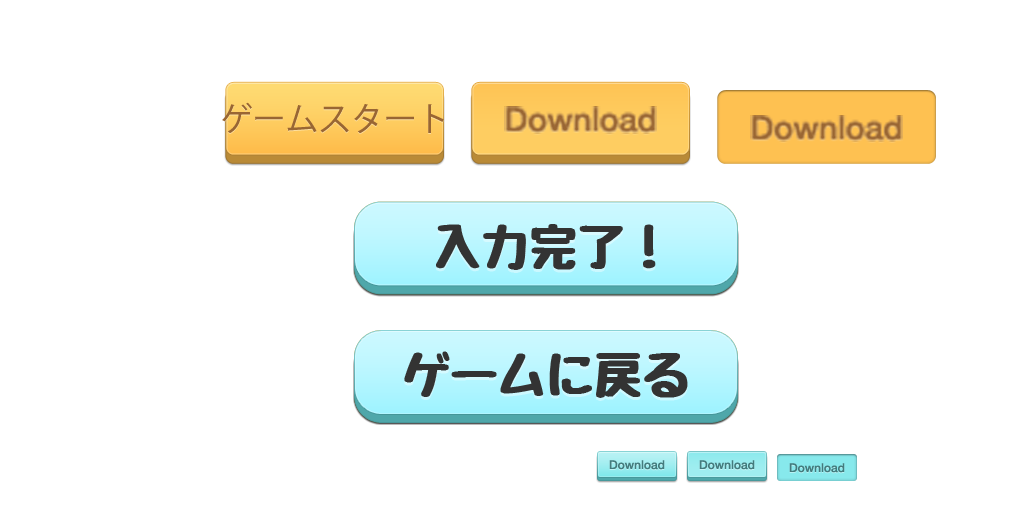
<style>
.page{position:relative;width:1024px;height:512px;background:#ffffff}
.page>*{position:absolute;margin:0}
.t1{font:32.8px "KozGoPr6N-Regular";color:#996633}
.t2{font:32.8px "HelveticaNeue-Medium";color:#996633}
.t3{font:48px "Jiyucho"}
.t4{font:48px "Jiyucho";color:#333333}
.t5{font:12px "HelveticaNeue-Medium";color:#437b7d}
</style>
<div class="page">
<p class="t1" style="left:222px;top:102px;width:222px;height:32px">ゲームスタート</p>
<p class="t2" style="left:504px;top:106px;width:153px;height:28px">Download</p>
<p class="t2" style="left:750px;top:115px;width:153px;height:27px">Download</p>
<p class="t3" style="left:436px;top:229px;width:220px;height:46px">入力完了！</p>
<p class="t4" style="left:436px;top:224px;width:220px;height:46px">入力完了！</p>
<p class="t4" style="left:436px;top:224px;width:220px;height:46px">入力完了！</p>
<p class="t4" style="left:404px;top:351px;width:284px;height:47px">ゲームに戻る</p>
<p class="t4" style="left:404px;top:351px;width:284px;height:47px">ゲームに戻る</p>
<p class="t3" style="left:404px;top:356px;width:284px;height:47px">ゲームに戻る</p>
<p class="t5" style="left:609px;top:460px;width:56px;height:10px">Download</p>
<p class="t5" style="left:699px;top:460px;width:56px;height:10px">Download</p>
<p class="t5" style="left:789px;top:463px;width:56px;height:10px">Download</p>
</div>
